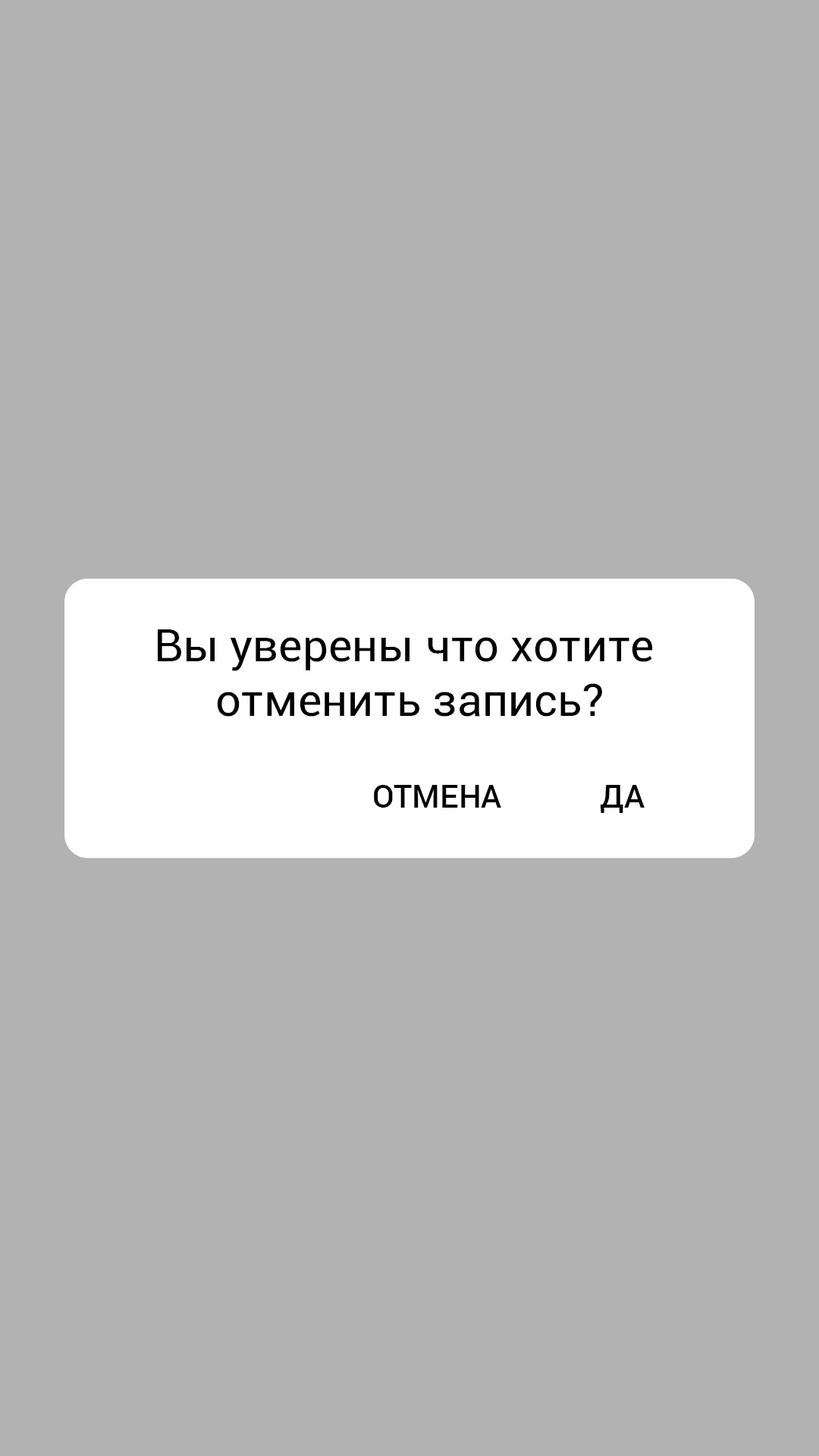
<style>
.page{position:relative;width:819px;height:1456px;background:#b2b2b2}
.page>*{position:absolute;margin:0}
.t1{font:45.5px "Roboto-Regular";color:#000000}
.t2{font:31.8px "Roboto-Medium";color:#000000}
</style>
<div class="page">
<p class="t1" style="left:158px;top:629px;width:495px;height:88px;text-align:center">Вы уверены что хотите <br>отменить запись?</p>
<p class="t2" style="left:374px;top:785px;width:127px;height:23px">ОТМЕНА</p>
<p class="t2" style="left:600px;top:785px;width:45px;height:28px">ДА</p>
</div>
